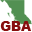
<style>
.page{position:relative;width:32px;height:32px;background:#ffffff}
.page>*{position:absolute;margin:0}
.t1{font:13px "Arial-Black";color:#870f0f}
</style>
<div class="page">
<p class="t1" style="left:0px;top:21px;width:31px;height:10px">GBA</p>
</div>
